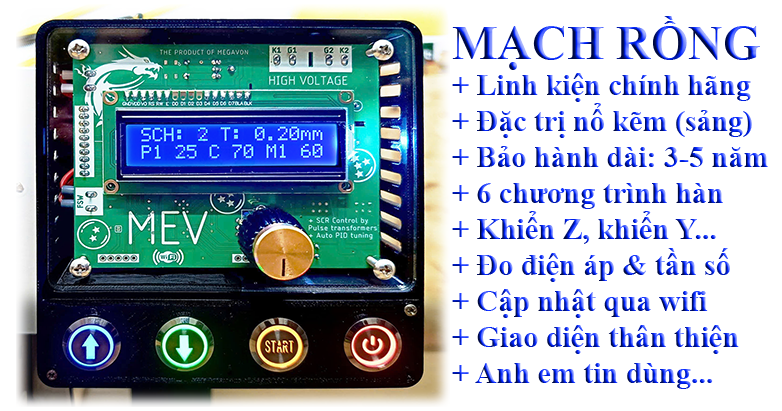
<style>
.page{position:relative;width:782px;height:411px;background:#ffffff}
.page>*{position:absolute;margin:0}
.t1{font:30px "TimesNewRomanPS-BoldMT"}
.t2{font:48px "TimesNewRomanPS-BoldMT"}
</style>
<div class="page">
<p class="t1" style="left:452px;top:16px;width:316px;height:373px"><span class="t2">MẠCH RỒNG<br></span>+ Linh kiện chính hãng<br>+ Đặc trị nổ kẽm (sảng)<br>+ Bảo hành dài: 3-5 năm<br>+ 6 chương trình hàn<br>+ Khiển Z, khiển Y...<br>+ Đo điện áp &amp; tần số<br>+ Cập nhật qua wifi<br>+ Giao diện thân thiện<br>+ Anh em tin dùng...</p>
</div>
